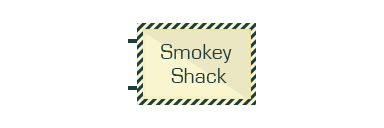
<style>
.page{position:relative;width:384px;height:128px;background:#ffffff}
.page>*{position:absolute;margin:0}
.t1{font:22px/24px "EurostileRegular";color:#1d3e3c}
</style>
<div class="page">
<p class="t1" style="left:161px;top:44px;width:71px;height:39px;text-align:center">Smokey <br>Shack</p>
</div>
